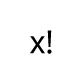
<style>
.page{position:relative;width:80px;height:80px;background:#ffffff}
.page>*{position:absolute;margin:0}
.t1{font:31.8px "DroidSans";color:#000000}
</style>
<div class="page">
<p class="t1" style="left:30px;top:30px;width:22px;height:24px">x!</p>
</div>
